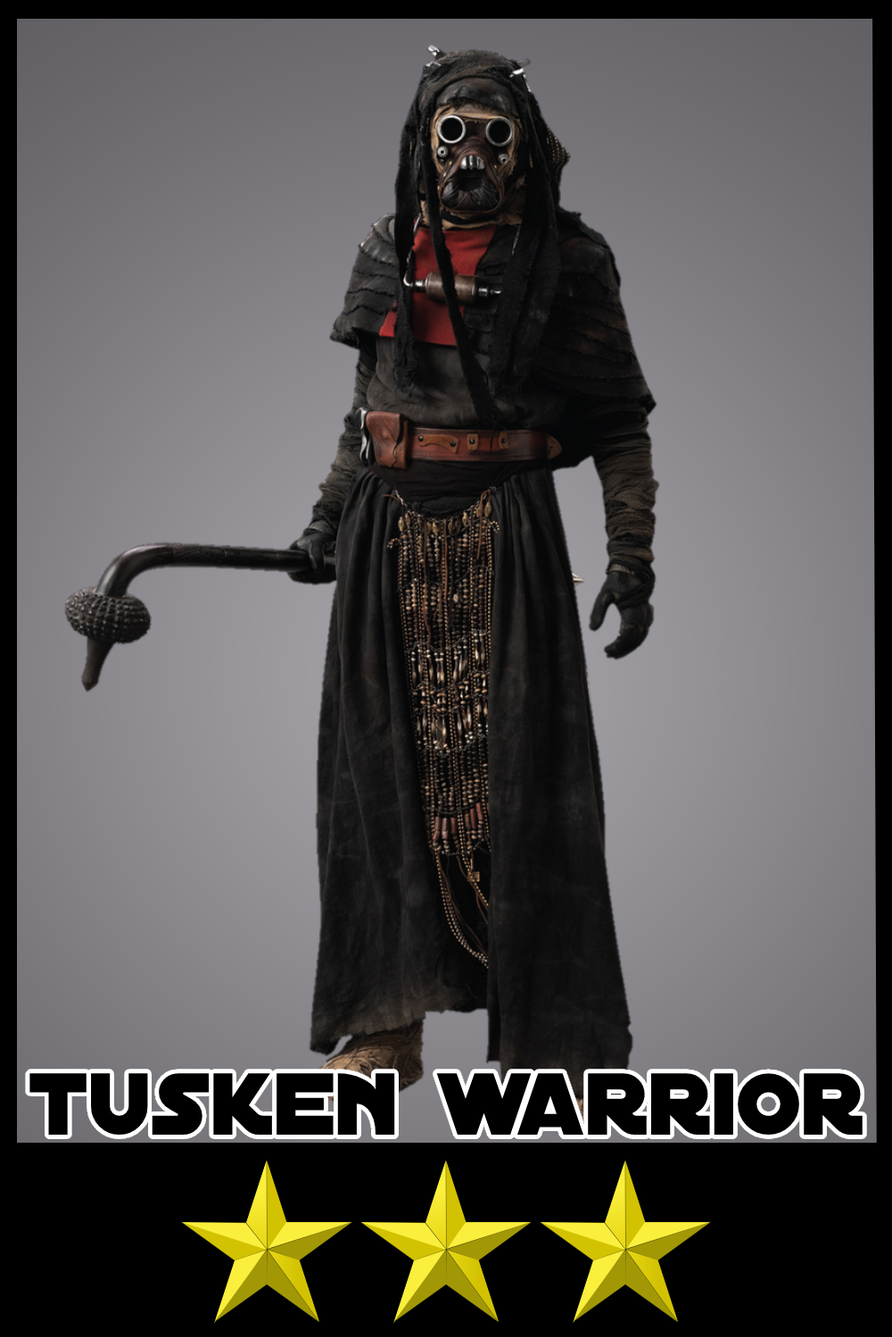
<style>
.page{position:relative;width:892px;height:1337px}
.page>*{position:absolute;margin:0}
.t1{font:94.2px "DistantGalaxy";color:#000000}
</style>
<div class="page">
<p class="t1" style="left:29px;top:1073px;width:833px;height:62px">tusken warrior</p>
</div>
